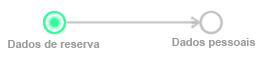
<style>
.page{position:relative;width:263px;height:60px;background:#ffffff}
.page>*{position:absolute;margin:0}
.t1{font:11px "Arial-BoldMT";color:#9c9c9c}
</style>
<div class="page">
<p class="t1" style="left:8px;top:40px;width:92px;height:8px">Dados de reserva</p>
<p class="t1" style="left:172px;top:38px;width:84px;height:10px">Dados pessoais</p>
</div>
